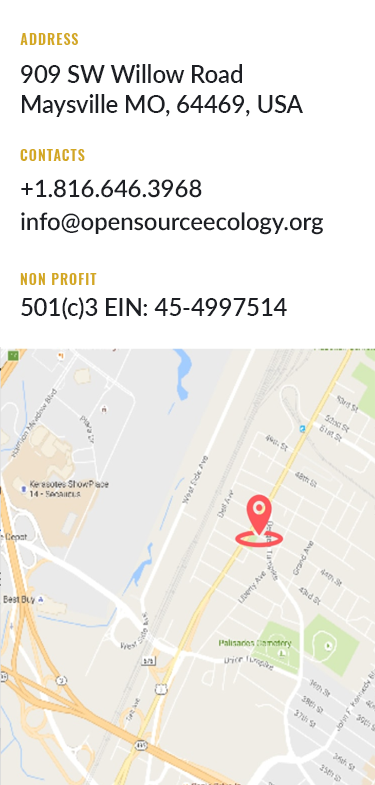
<style>
.page{position:relative;width:375px;height:785px;background:#ffffff}
.page>*{position:absolute;margin:0}
.t1{font:14px "Oswald-SemiBold";letter-spacing:0.075em;color:#d3a822;text-transform:uppercase}
.t2{font:24px/30px "Lato-Semibold";letter-spacing:-0.005em;color:#1d1f24}
.t3{font:24px "Lato-Semibold";letter-spacing:-0.005em;color:#1d1f24}
</style>
<div class="page">
<p class="t1" style="left:20px;top:33px;width:58px;height:12px">Address</p>
<p class="t2" style="left:21px;top:64px;width:282px;height:53px">909 SW Willow Road<br>Maysville MO, 64469, USA</p>
<p class="t1" style="left:20px;top:149px;width:65px;height:12px">Contacts</p>
<p class="t3" style="left:21px;top:179px;width:181px;height:19px">+1.816.646.3968</p>
<p class="t3" style="left:21px;top:212px;width:302px;height:23px">info@opensourceecology.org</p>
<p class="t1" style="left:20px;top:273px;width:77px;height:12px">Non profit</p>
<p class="t3" style="left:21px;top:297px;width:266px;height:23px">501(c)3 EIN: 45-4997514</p>
</div>
